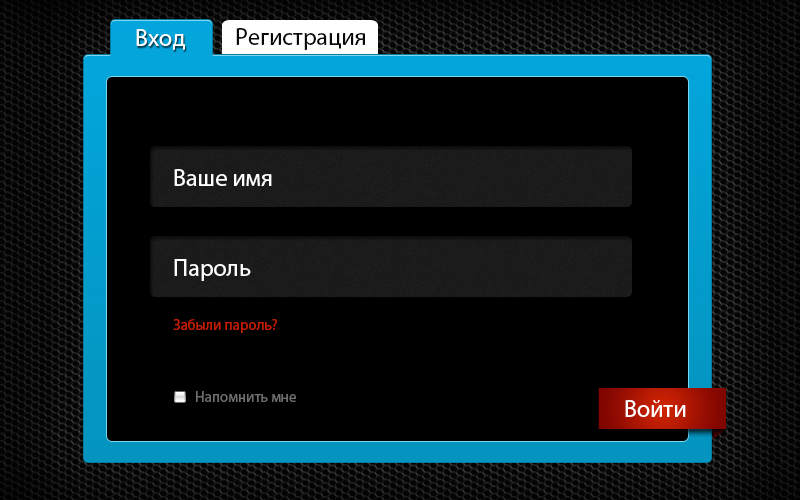
<style>
.page{position:relative;width:800px;height:500px;background:#000000}
.page>*{position:absolute;margin:0}
.t1{font:24px "MyriadPro-Regular";color:#ffffff}
.t2{font:24px "MyriadPro-Regular";color:#080808}
.t3{font:15px "MyriadPro-Regular";color:#c51f03}
.t4{font:15px "MyriadPro-Regular";color:#6f6d6d}
</style>
<div class="page">
<p class="t1" style="left:136px;top:29px;width:49px;height:21px">Вход</p>
<p class="t2" style="left:236px;top:28px;width:129px;height:22px">Регистрация</p>
<p class="t1" style="left:174px;top:169px;width:98px;height:17px">Ваше имя</p>
<p class="t1" style="left:174px;top:259px;width:77px;height:22px">Пароль</p>
<p class="t3" style="left:173px;top:319px;width:104px;height:14px">Забыли пароль?</p>
<p class="t4" style="left:196px;top:391px;width:100px;height:11px">Напомнить мне</p>
<p class="t1" style="left:625px;top:400px;width:61px;height:17px">Войти</p>
</div>
